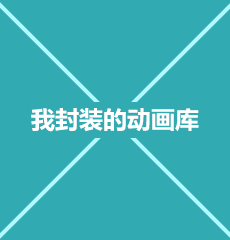
<style>
.page{position:relative;width:230px;height:240px;background:#31aab2}
.page>*{position:absolute;margin:0}
.t1{font:24px "MicrosoftYaHeiUI-Bold";color:#ffffff}
</style>
<div class="page">
<p class="t1" style="left:31px;top:108px;width:168px;height:24px">我封装的动画库</p>
</div>
